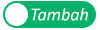
<style>
.page{position:relative;width:100px;height:30px;background:#00b16a}
.page>*{position:absolute;margin:0}
.t1{font:18px "Calibri-Italic";color:#ffffff}
</style>
<div class="page">
<p class="t1" style="left:31px;top:8px;width:57px;height:13px">Tambah</p>
</div>
